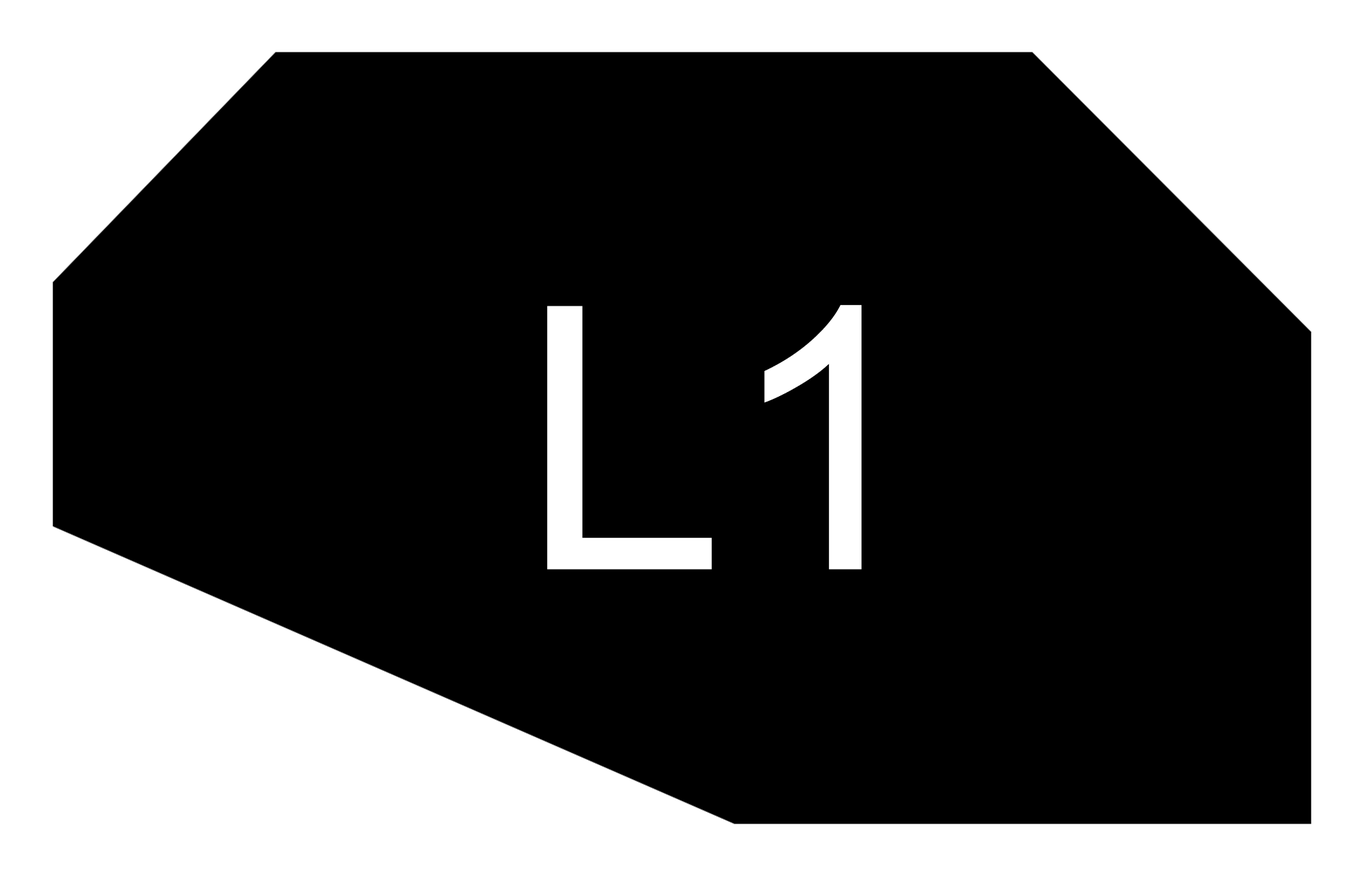
<style>
.page{position:relative;width:1361px;height:876px;background:#000000}
.page>*{position:absolute;margin:0}
.t1{font:367.1px "ArialMT";color:#ffffff}
</style>
<div class="page">
<p class="t1" style="left:547px;top:305px;width:315px;height:265px">L1</p>
</div>
